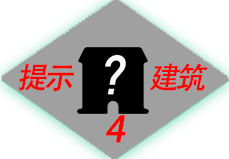
<style>
.page{position:relative;width:229px;height:159px;background:#a0a0a0}
.page>*{position:absolute;margin:0}
.t1{font:30px "AdobeHeitiStd-Regular";letter-spacing:-0.1em;color:#ff0000;font-style:italic}
.t2{font:36px "AdobeHeitiStd-Regular";letter-spacing:-0.1em;color:#ff0000;font-style:italic}
</style>
<div class="page">
<p class="t1" style="left:18px;top:63px;width:190px;height:29px">提示                     建筑</p>
<p class="t2" style="left:106px;top:115px;width:20px;height:28px">4</p>
</div>
